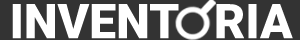
<style>
.page{position:relative;width:300px;height:40px;background:#333333}
.page>*{position:absolute;margin:0}
.t1{font:48px "Roboto-Black";color:#ffffff}
</style>
<div class="page">
<p class="t1" style="left:12px;top:4px;width:281px;height:35px">INVENT   RIA</p>
</div>
